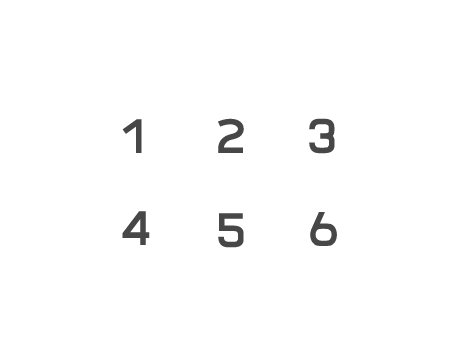
<style>
.page{position:relative;width:459px;height:364px;background:#ffffff}
.page>*{position:absolute;margin:0}
.t1{font:60px "SuperspaceBold";color:#474747}
</style>
<div class="page">
<p class="t1" style="left:122px;top:119px;width:20px;height:34px">1</p>
<p class="t1" style="left:218px;top:118px;width:26px;height:35px">2</p>
<p class="t1" style="left:309px;top:118px;width:26px;height:36px">3</p>
<p class="t1" style="left:122px;top:211px;width:28px;height:34px">4</p>
<p class="t1" style="left:218px;top:213px;width:26px;height:35px">5</p>
<p class="t1" style="left:310px;top:212px;width:27px;height:34px">6</p>
</div>
